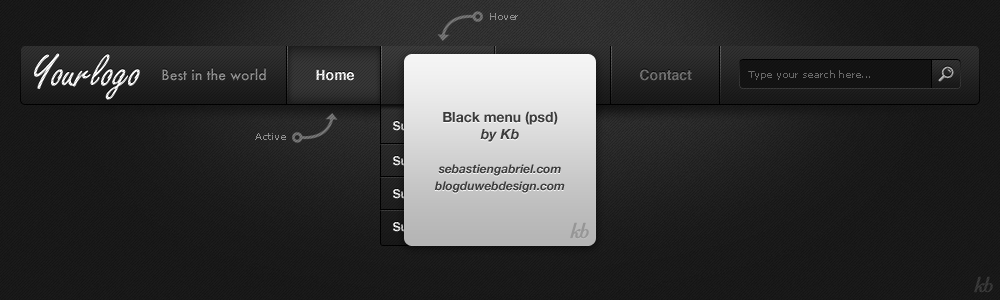
<style>
.page{position:relative;width:1000px;height:300px}
.page>*{position:absolute;margin:0}
.t1{font:10px "Verdana";color:#969696}
.t2{font:46.8px "Carefree"}
.t3{font:14px "Futura-Medium"}
.t4{font:14px "Helvetica-Bold";color:#ffffff}
.t5{font:14px "Helvetica-Bold";color:#747474}
.t6{font:10px "Verdana";color:#6d6d6d}
.t7{font:12px/17px "HelveticaNeue-BoldItalic";color:#3c3c3c}
.t8{font:14px/17px "HelveticaNeue-Bold";color:#3c3c3c}
.t9{font:14px/17px "HelveticaNeue-BoldItalic";color:#3c3c3c}
</style>
<div class="page">
<p class="t1" style="left:490px;top:13px;width:28px;height:7px">Hover</p>
<p class="t2" style="left:34px;top:53px;width:106px;height:47px">Yourlogo</p>
<p class="t3" style="left:162px;top:68px;width:104px;height:13px">Best in the world</p>
<p class="t4" style="left:316px;top:69px;width:38px;height:12px">Home</p>
<p class="t5" style="left:640px;top:69px;width:52px;height:12px">Contact</p>
<p class="t6" style="left:748px;top:70px;width:122px;height:10px">Type your search here...</p>
<p class="t7" style="left:434px;top:111px;width:131px;height:82px;text-align:center"><span class="t8">Black menu (psd)<br></span><span class="t9">by Kb<br><br></span>sebastiengabriel.com<br>blogduwebdesign.com</p>
<p class="t1" style="left:255px;top:133px;width:31px;height:7px">Active</p>
</div>
